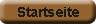
<style>
.page{position:relative;width:96px;height:24px;background:#95632f}
.page>*{position:absolute;margin:0}
.t1{font:13.5px "Arial-BoldMT";color:#1b1b1b}
</style>
<div class="page">
<p class="t1" style="left:18px;top:7px;width:61px;height:10px">Startseite</p>
</div>
